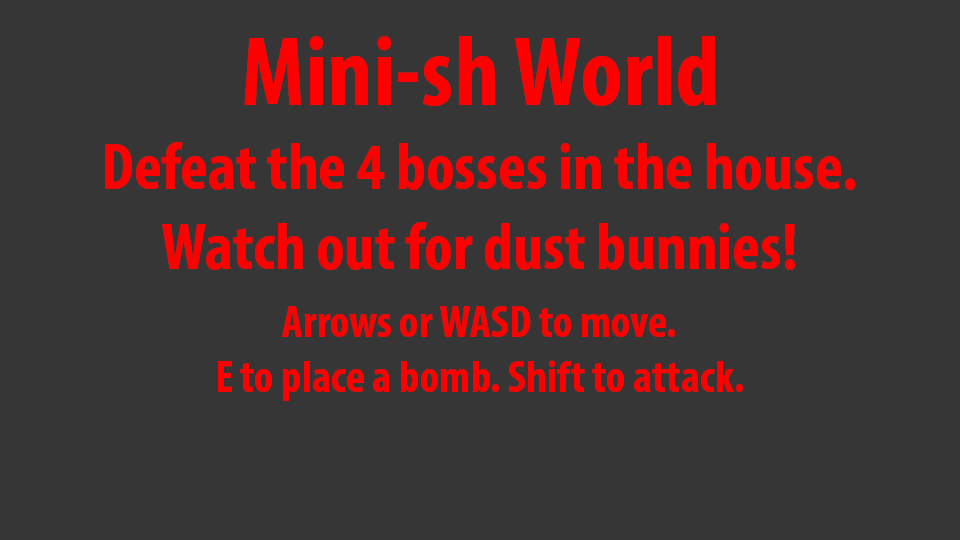
<style>
.page{position:relative;width:960px;height:540px;background:#363636}
.page>*{position:absolute;margin:0}
.t1{font:100px "MyriadPro-BoldCond";color:#ff0000}
.t2{font:66.7px "MyriadPro-BoldCond";color:#ff0000}
.t3{font:45.8px "MyriadPro-BoldCond";color:#ff0000}
</style>
<div class="page">
<p class="t1" style="left:244px;top:36px;width:472px;height:70px">Mini-sh World</p>
<p class="t2" style="left:105px;top:142px;width:751px;height:128px;text-align:center">Defeat the 4 bosses in the house.<br>Watch out for dust bunnies!</p>
<p class="t3" style="left:218px;top:306px;width:525px;height:95px;text-align:center">Arrows or WASD to move.<br>E to place a bomb. Shift to attack.</p>
</div>
